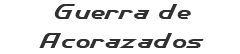
<style>
.page{position:relative;width:240px;height:54px;background:#ffffff}
.page>*{position:absolute;margin:0}
.t1{font:24px "CybertronMetalsNormal";color:#303030}
</style>
<div class="page">
<p class="t1" style="left:39px;top:4px;width:165px;height:44px;text-align:center">Guerra de<br>Acorazados</p>
</div>
